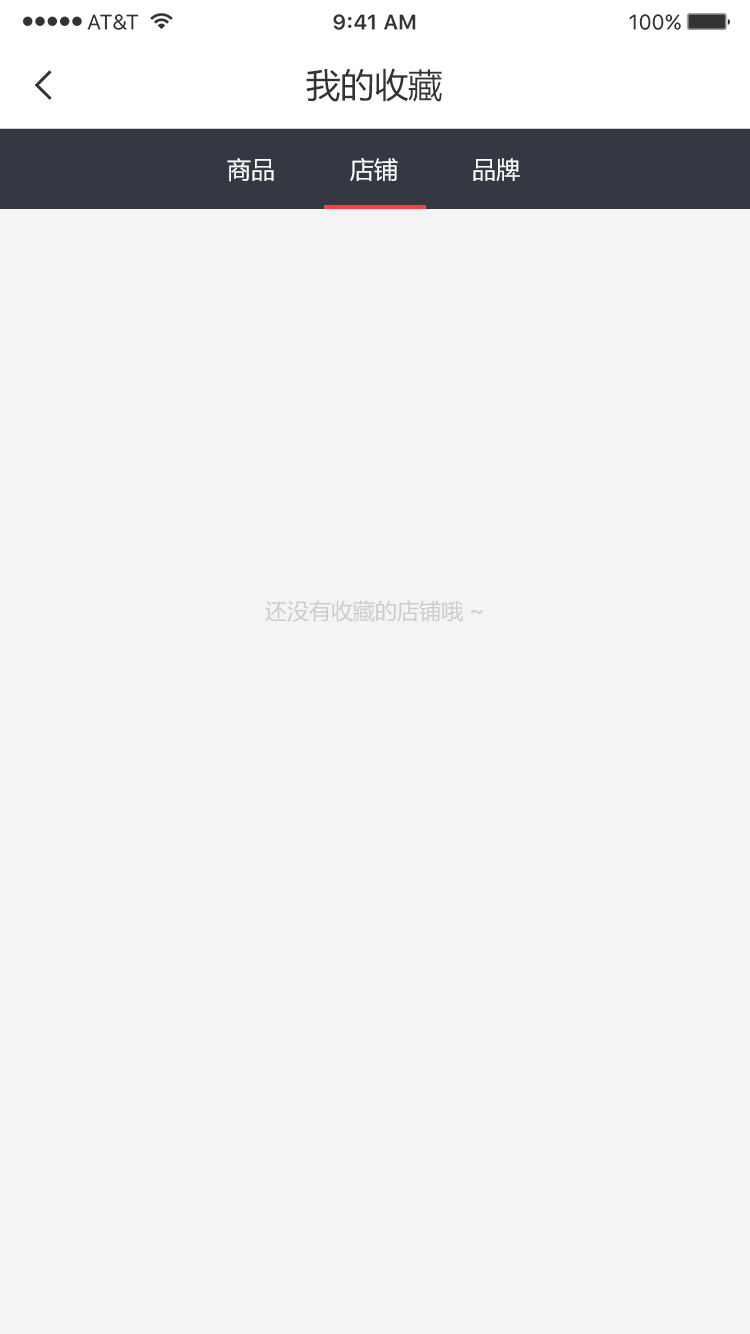
<style>
.page{position:relative;width:750px;height:1334px;background:#f4f4f4}
.page>*{position:absolute;margin:0}
.t1{font:34px "MicrosoftYaHei";color:#333333}
.t2{font:24px "MicrosoftYaHei";color:#ffffff}
.t3{font:22px "MicrosoftYaHei";color:#cccccc}
</style>
<div class="page">
<p class="t1" style="left:306px;top:68px;width:136px;height:34px">我的收藏</p>
<p class="t2" style="left:227px;top:158px;width:47px;height:24px">商品</p>
<p class="t2" style="left:350px;top:157px;width:48px;height:25px">店铺</p>
<p class="t2" style="left:473px;top:158px;width:47px;height:24px">品牌</p>
<p class="t3" style="left:265px;top:600px;width:218px;height:22px">还没有收藏的店铺哦~</p>
</div>
